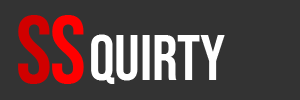
<style>
.page{position:relative;width:300px;height:100px;background:#333333}
.page>*{position:absolute;margin:0}
.t1{font:96.5px "BebasNeue-Regular";letter-spacing:-0.025em;color:#d10000}
.t2{font:96.5px "BebasNeue-Regular";letter-spacing:-0.025em;color:#ff0000}
.t3{font:64px "BebasNeue-Regular";letter-spacing:-0.005em;color:#ffffff}
</style>
<div class="page">
<p class="t1" style="left:18px;top:15px;width:66px;height:69px">S<span class="t2">S</span></p>
<p class="t3" style="left:91px;top:34px;width:134px;height:50px">QUIRTY</p>
</div>
